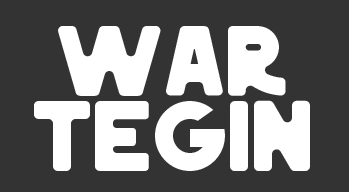
<style>
.page{position:relative;width:349px;height:192px;background:#333333}
.page>*{position:absolute;margin:0}
.t1{font:100px/75px "AntlerBold-Bold";letter-spacing:-0.045em;color:#ffffff}
</style>
<div class="page">
<p class="t1" style="left:34px;top:26px;width:276px;height:145px;text-align:center">War<br>tegin</p>
</div>
